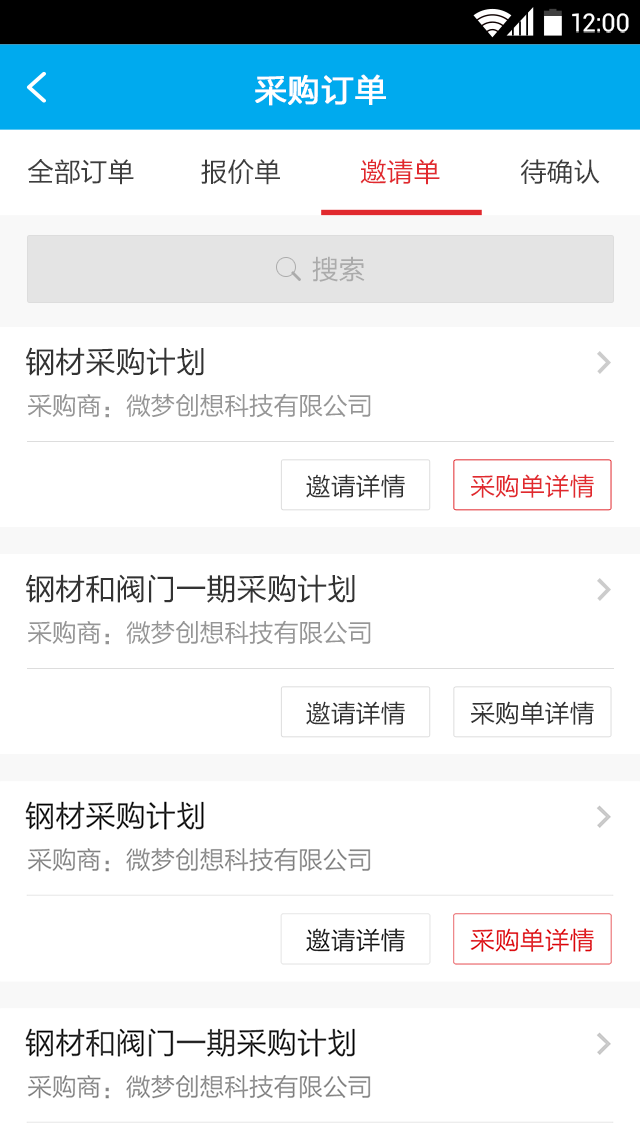
<style>
.page{position:relative;width:640px;height:1138px;background:#ffffff}
.page>*{position:absolute;margin:0}
.t1{font:24.9px "Roboto-Regular";color:#ffffff}
.t2{font:32px "FZLTHJW--GB1-0";letter-spacing:0.02em;color:#ffffff;font-weight:bold}
.t3{font:26.7px "FZLTHJW--GB1-0";color:#3d3d3d}
.t4{font:26.7px "FZLTHJW--GB1-0";color:#e1292e}
.t5{font:26.7px "FZLTHJW--GB1-0";color:#ababab}
.t6{font:30.2px "FZLTHJW--GB1-0";color:#333333}
.t7{font:24.9px "FZLTHJW--GB1-0";letter-spacing:-0.01em;color:#969696;text-transform:uppercase}
.t8{font:24.9px "FZLTHJW--GB1-0";color:#333333}
.t9{font:24.9px "FZLTHJW--GB1-0";color:#e1292e}
</style>
<div class="page">
<p class="t1" style="left:572px;top:13px;width:57px;height:20px">12:00</p>
<p class="t2" style="left:255px;top:74px;width:131px;height:32px">采购订单</p>
<p class="t3" style="left:28px;top:159px;width:106px;height:26px">全部订单</p>
<p class="t3" style="left:201px;top:159px;width:79px;height:26px">报价单</p>
<p class="t4" style="left:360px;top:159px;width:80px;height:26px">邀请单</p>
<p class="t3" style="left:520px;top:159px;width:80px;height:25px">待确认</p>
<p class="t5" style="left:312px;top:256px;width:53px;height:26px">搜索</p>
<p class="t6" style="left:26px;top:347px;width:178px;height:29px">钢材采购计划</p>
<p class="t7" style="left:28px;top:393px;width:343px;height:25px">采购商：微梦创想科技有限公司</p>
<p class="t8" style="left:306px;top:474px;width:99px;height:24px">邀请详情</p>
<p class="t9" style="left:471px;top:474px;width:123px;height:24px">采购单详情</p>
<p class="t6" style="left:26px;top:574px;width:329px;height:29px">钢材和阀门一期采购计划</p>
<p class="t7" style="left:28px;top:620px;width:343px;height:25px">采购商：微梦创想科技有限公司</p>
<p class="t8" style="left:306px;top:701px;width:99px;height:24px">邀请详情</p>
<p class="t8" style="left:471px;top:701px;width:123px;height:24px">采购单详情</p>
</div>
